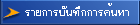
<style>
.page{position:relative;width:140px;height:25px}
.page>*{position:absolute;margin:0}
.t1{font:15.3px "EucrosiaDSE";color:#ffffff;scale:1.12 1}
</style>
<div class="page">
<p class="t1" style="left:25px;top:3px;width:104px;height:13px">ÃÒÂ¡ÒÃºÑ¹·Ö¡¡ÒÃ¤é¹ËÒ</p>
</div>
